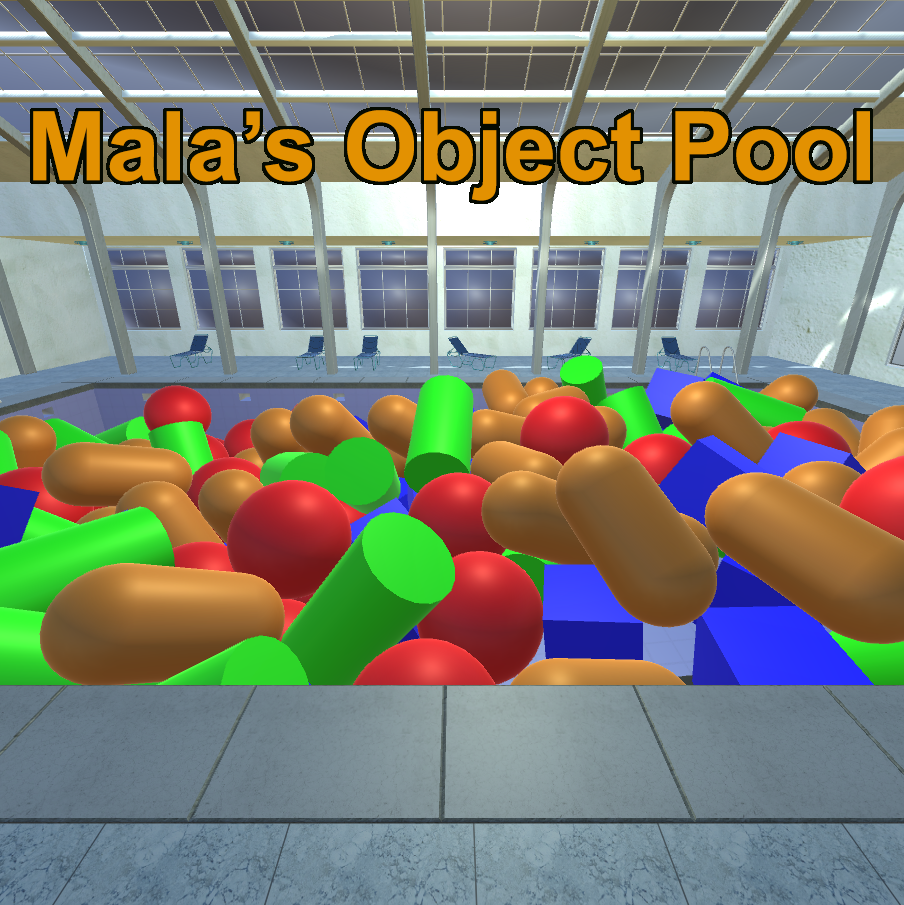
<style>
.page{position:relative;width:904px;height:905px}
.page>*{position:absolute;margin:0}
.t1{font:96px "Arial-BoldMT";color:#e39101}
</style>
<div class="page">
<p class="t1" style="left:33px;top:110px;width:837px;height:91px">Mala’s Object Pool</p>
</div>
